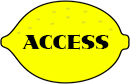
<style>
.page{position:relative;width:130px;height:84px;background:#fbff00}
.page>*{position:absolute;margin:0}
.t1{font:20px "Vogue";color:#000000}
</style>
<div class="page">
<p class="t1" style="left:22px;top:34px;width:87px;height:16px">ACCESS</p>
</div>
